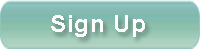
<style>
.page{position:relative;width:200px;height:50px}
.page>*{position:absolute;margin:0}
.t1{font:24px "Arial-BoldMT";letter-spacing:0.025em;color:#fefefe}
</style>
<div class="page">
<p class="t1" style="left:51px;top:15px;width:94px;height:22px">Sign Up</p>
</div>
